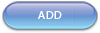
<style>
.page{position:relative;width:100px;height:33px}
.page>*{position:absolute;margin:0}
.t1{font:11.9px "MyriadPro-Regular";color:#ffffff}
</style>
<div class="page">
<p class="t1" style="left:38px;top:11px;width:24px;height:8px">ADD</p>
</div>
